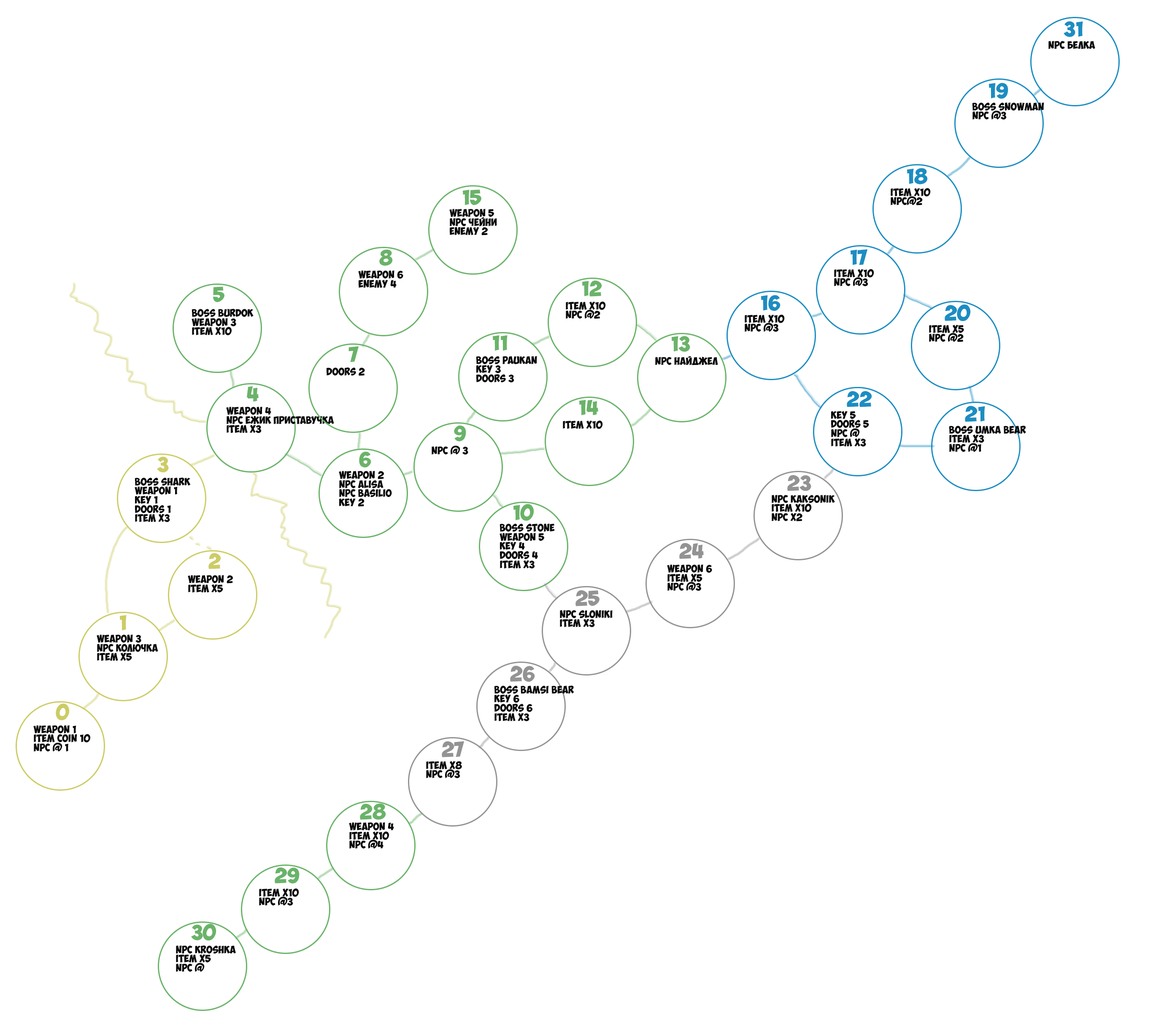
<style>
.page{position:relative;width:1164px;height:1024px;background:#ffffff}
.page>*{position:absolute;margin:0}
.t1{font:15.2px "ObelixPro";color:#1c8dc2}
.t2{font:7.6px "ObelixPro";color:#080808}
.t3{font:15.2px "ObelixPro";color:#6ab369}
.t4{font:15.2px "ObelixPro";color:#cccc66}
.t5{font:15.2px "ObelixPro";color:#939393}
</style>
<div class="page">
<p class="t1" style="left:1064px;top:21px;width:19px;height:16px">31</p>
<p class="t2" style="left:1049px;top:41px;width:46px;height:8px">npc белка</p>
<p class="t1" style="left:989px;top:83px;width:20px;height:16px">19</p>
<p class="t2" style="left:972px;top:103px;width:72px;height:17px">boss snowman<br>npc @3</p>
<p class="t1" style="left:907px;top:168px;width:21px;height:16px">18</p>
<p class="t3" style="left:463px;top:189px;width:18px;height:16px">15</p>
<p class="t2" style="left:891px;top:188px;width:40px;height:18px">item x10<br>npc@2</p>
<p class="t2" style="left:449px;top:209px;width:48px;height:26px">weapon 5<br>npc чейни<br>enemy 2</p>
<p class="t3" style="left:379px;top:249px;width:14px;height:17px">8</p>
<p class="t1" style="left:851px;top:249px;width:17px;height:16px">17</p>
<p class="t2" style="left:834px;top:269px;width:40px;height:18px">item x10<br>npc @3</p>
<p class="t2" style="left:358px;top:270px;width:45px;height:18px">weapon 6<br>enemy 4</p>
<p class="t3" style="left:582px;top:281px;width:20px;height:16px">12</p>
<p class="t3" style="left:213px;top:287px;width:12px;height:15px">5</p>
<p class="t2" style="left:566px;top:301px;width:40px;height:18px">item x10<br>npc @2</p>
<p class="t1" style="left:761px;top:295px;width:20px;height:16px">16</p>
<p class="t1" style="left:945px;top:304px;width:26px;height:17px">20</p>
<p class="t2" style="left:192px;top:309px;width:62px;height:26px">boss burdok<br>weapon 3<br>item x10</p>
<p class="t2" style="left:745px;top:314px;width:40px;height:18px">item x10<br>npc @3</p>
<p class="t2" style="left:929px;top:325px;width:35px;height:17px">item x5<br>npc @2</p>
<p class="t3" style="left:493px;top:335px;width:15px;height:16px">11</p>
<p class="t3" style="left:672px;top:336px;width:18px;height:16px">13</p>
<p class="t3" style="left:349px;top:346px;width:10px;height:16px">7</p>
<p class="t2" style="left:476px;top:356px;width:61px;height:27px">boss paukan<br>key 3<br>doors 3</p>
<p class="t2" style="left:655px;top:356px;width:63px;height:9px">npc Найджел</p>
<p class="t2" style="left:327px;top:368px;width:38px;height:8px">doors 2</p>
<p class="t3" style="left:247px;top:386px;width:12px;height:16px">4</p>
<p class="t3" style="left:579px;top:400px;width:19px;height:15px">14</p>
<p class="t1" style="left:847px;top:391px;width:25px;height:16px">22</p>
<p class="t2" style="left:226px;top:407px;width:108px;height:26px">weapon 4<br>npc ежик Приставучка<br>item x3</p>
<p class="t2" style="left:831px;top:411px;width:38px;height:36px">key 5<br>doors 5<br>npc @<br>item x3</p>
<p class="t1" style="left:965px;top:406px;width:20px;height:16px">21</p>
<p class="t3" style="left:454px;top:425px;width:12px;height:16px">9</p>
<p class="t2" style="left:563px;top:420px;width:40px;height:9px">item x10</p>
<p class="t2" style="left:949px;top:426px;width:77px;height:26px">boss umka bear<br>item x3<br>npc @1</p>
<p class="t2" style="left:432px;top:446px;width:36px;height:9px">npc @ 3</p>
<p class="t4" style="left:157px;top:457px;width:12px;height:16px">3</p>
<p class="t3" style="left:359px;top:452px;width:12px;height:16px">6</p>
<p class="t2" style="left:339px;top:471px;width:53px;height:36px">weapon 2<br>npc alisa<br>npc basilio<br>key 2</p>
<p class="t2" style="left:135px;top:478px;width:56px;height:44px">boss shark<br>weapon 1<br>key 1<br>doors 1<br>item x3</p>
<p class="t5" style="left:787px;top:475px;width:24px;height:16px">23</p>
<p class="t2" style="left:772px;top:495px;width:63px;height:27px">npc kaksonik<br>item x10<br>npc x2</p>
<p class="t3" style="left:514px;top:504px;width:20px;height:17px">10</p>
<p class="t2" style="left:500px;top:524px;width:55px;height:45px">boss stone<br>weapon 5<br>key 4<br>doors 4<br>item x3</p>
<p class="t5" style="left:679px;top:543px;width:25px;height:16px">24</p>
<p class="t4" style="left:208px;top:553px;width:13px;height:16px">2</p>
<p class="t2" style="left:667px;top:565px;width:45px;height:26px">weapon 6<br>item x5<br>npc @3</p>
<p class="t2" style="left:188px;top:575px;width:45px;height:18px">weapon 2<br>item x5</p>
<p class="t5" style="left:576px;top:590px;width:24px;height:16px">25</p>
<p class="t4" style="left:120px;top:615px;width:7px;height:15px">1</p>
<p class="t2" style="left:560px;top:610px;width:53px;height:18px">npc sloniki<br>item x3</p>
<p class="t2" style="left:97px;top:635px;width:61px;height:26px">weapon 3<br>npc колючка<br>item x5</p>
<p class="t5" style="left:510px;top:666px;width:25px;height:16px">26</p>
<p class="t2" style="left:494px;top:686px;width:80px;height:36px">boss bamsi bear<br>key 6<br>doors 6<br>item x3</p>
<p class="t4" style="left:56px;top:703px;width:14px;height:17px">0</p>
<p class="t2" style="left:33px;top:725px;width:57px;height:27px">weapon 1<br>item coin 10<br>npc @ 1</p>
<p class="t5" style="left:442px;top:741px;width:23px;height:16px">27</p>
<p class="t2" style="left:426px;top:761px;width:36px;height:18px">item x8<br>npc @3</p>
<p class="t3" style="left:360px;top:803px;width:26px;height:17px">28</p>
<p class="t2" style="left:349px;top:822px;width:45px;height:27px">weapon 4<br>item x10<br>npc @4</p>
<p class="t3" style="left:275px;top:868px;width:25px;height:16px">29</p>
<p class="t2" style="left:259px;top:888px;width:40px;height:18px">item x10<br>npc @3</p>
<p class="t3" style="left:191px;top:924px;width:25px;height:17px">30</p>
<p class="t2" style="left:176px;top:946px;width:60px;height:26px">npc kroshka<br>item x5<br>npc @</p>
</div>
